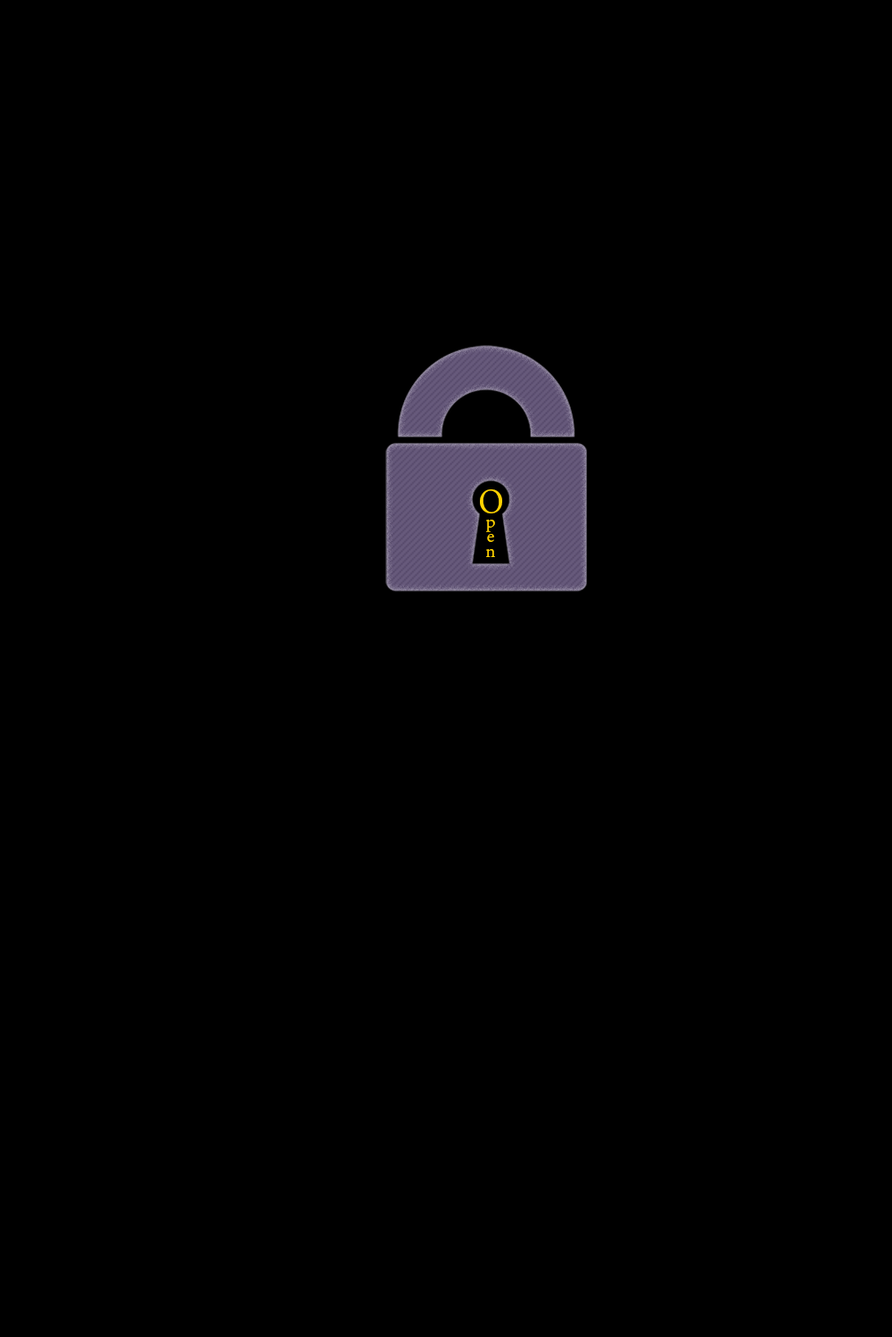
<style>
.page{position:relative;width:892px;height:1337px;background:#000000}
.page>*{position:absolute;margin:0}
.t1{font:18.6px/14.9px "AdobeGurmukhi-Regular";color:#ffd200}
.t2{font:37.2px/14.9px "AdobeGurmukhi-Regular";color:#ffd200}
</style>
<div class="page">
<p class="t1" style="left:480px;top:489px;width:22px;height:68px;text-align:center"><span class="t2">O<br></span>p<br>e<br>n</p>
</div>
